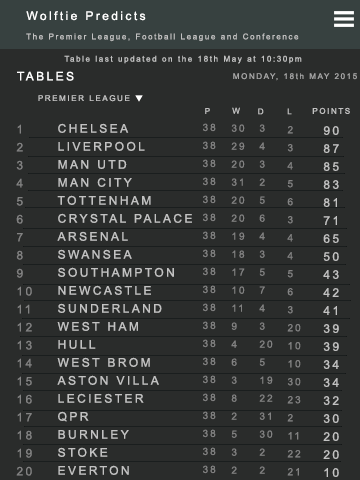
<style>
.page{position:relative;width:360px;height:480px;background:#2a2c2b}
.page>*{position:absolute;margin:0}
.t1{font:12px "ArialMT";letter-spacing:0.2em;color:#ffffff}
.t2{font:8px "ArialMT";letter-spacing:0.2em;color:#c2c2c2}
.t3{font:8px "ArialMT";letter-spacing:0.2em;color:#a5a5a5}
.t4{font:12px/18px "ArialMT";letter-spacing:0.2em;color:#828282}
.t5{font:12px/18px "ArialMT";letter-spacing:0.2em;color:#c2c2c2}
.t6{font:10px/18px "ArialMT";letter-spacing:0.2em;color:#828282}
</style>
<div class="page">
<p class="t1" style="left:26px;top:11px;width:120px;height:10px">Wolftie Predicts</p>
<p class="t2" style="left:26px;top:33px;width:273px;height:9px">The Premier League, Football League and Conference</p>
<p class="t2" style="left:64px;top:55px;width:238px;height:9px">Table last updated on the 18th May at 10:30pm</p>
<p class="t1" style="left:17px;top:71px;width:57px;height:10px">TABLES</p>
<p class="t3" style="left:233px;top:73px;width:124px;height:8px">MONDAY, 18th MAY 2015</p>
<p class="t2" style="left:38px;top:95px;width:92px;height:7px">PREMIER LEAGUE</p>
<p class="t2" style="left:205px;top:108px;width:5px;height:6px">P</p>
<p class="t2" style="left:232px;top:107px;width:8px;height:7px">W</p>
<p class="t2" style="left:258px;top:108px;width:6px;height:7px">D</p>
<p class="t2" style="left:287px;top:108px;width:5px;height:7px">L</p>
<p class="t2" style="left:312px;top:107px;width:38px;height:7px">POINTS</p>
<p class="t4" style="left:16px;top:124px;width:16px;height:352px">1<br>2<br>3<br>4<br>5<br>6<br>7<br>8<br>9<br>10<br>11<br>12<br>13<br>14<br>15<br>16<br>17<br>18<br>19<br>20</p>
<p class="t5" style="left:57px;top:123px;width:135px;height:352px">CHELSEA<br>LIVERPOOL<br>MAN UTD<br>MAN CITY<br>TOTTENHAM<br>CRYSTAL PALACE<br>ARSENAL<br>SWANSEA<br>SOUTHAMPTON<br>NEWCASTLE<br>SUNDERLAND<br>WEST HAM<br>HULL<br>WEST BROM<br>ASTON VILLA<br>LECIESTER<br>QPR<br>BURNLEY<br>STOKE<br>EVERTON</p>
<p class="t6" style="left:203px;top:123px;width:13px;height:351px">38<br>38<br>38<br>38<br>38<br>38<br>38<br>38<br>38<br>38<br>38<br>38<br>38<br>38<br>38<br>38<br>38<br>38<br>38<br>38</p>
<p class="t6" style="left:231px;top:124px;width:14px;height:350px">30<br>29<br>20<br>31<br>20<br>20<br>19<br>18<br>17<br>10<br>11<br>9<br>4<br>6<br>3<br>8<br>2<br>5<br>3<br>2</p>
<p class="t6" style="left:259px;top:124px;width:14px;height:350px">3<br>4<br>3<br>2<br>5<br>6<br>4<br>3<br>5<br>7<br>4<br>3<br>20<br>5<br>19<br>22<br>31<br>30<br>2<br>2</p>
<p class="t6" style="left:287px;top:126px;width:14px;height:350px">2<br>3<br>4<br>5<br>6<br>3<br>4<br>4<br>5<br>6<br>3<br>20<br>10<br>10<br>30<br>23<br>2<br>11<br>22<br>21</p>
<p class="t5" style="left:323px;top:126px;width:16px;height:351px">90<br>87<br>85<br>83<br>81<br>71<br>65<br>50<br>43<br>42<br>41<br>39<br>39<br>34<br>34<br>32<br>30<br>20<br>20<br>10</p>
</div>
